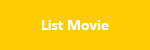
<style>
.page{position:relative;width:150px;height:50px;background:#ffcc00}
.page>*{position:absolute;margin:0}
.t1{font:16px "Calibri-Bold";color:#ffffff}
</style>
<div class="page">
<p class="t1" style="left:42px;top:20px;width:67px;height:10px">List Movie</p>
</div>
